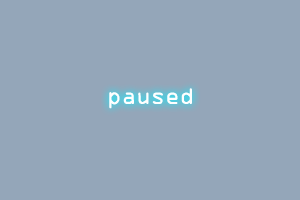
<style>
.page{position:relative;width:300px;height:200px;background:#94a6b9}
.page>*{position:absolute;margin:0}
.t1{font:24px "OCRAExtended";color:#ffffff}
</style>
<div class="page">
<p class="t1" style="left:109px;top:88px;width:83px;height:21px">paused</p>
</div>
